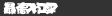
<style>
.page{position:relative;width:112px;height:16px;background:#333333}
.page>*{position:absolute;margin:0}
.t1{font:13.3px "DFPHaiBaoW12";color:#ffffff}
</style>
<div class="page">
<p class="t1" style="left:3px;top:2px;width:53px;height:13px">最高分数</p>
</div>
